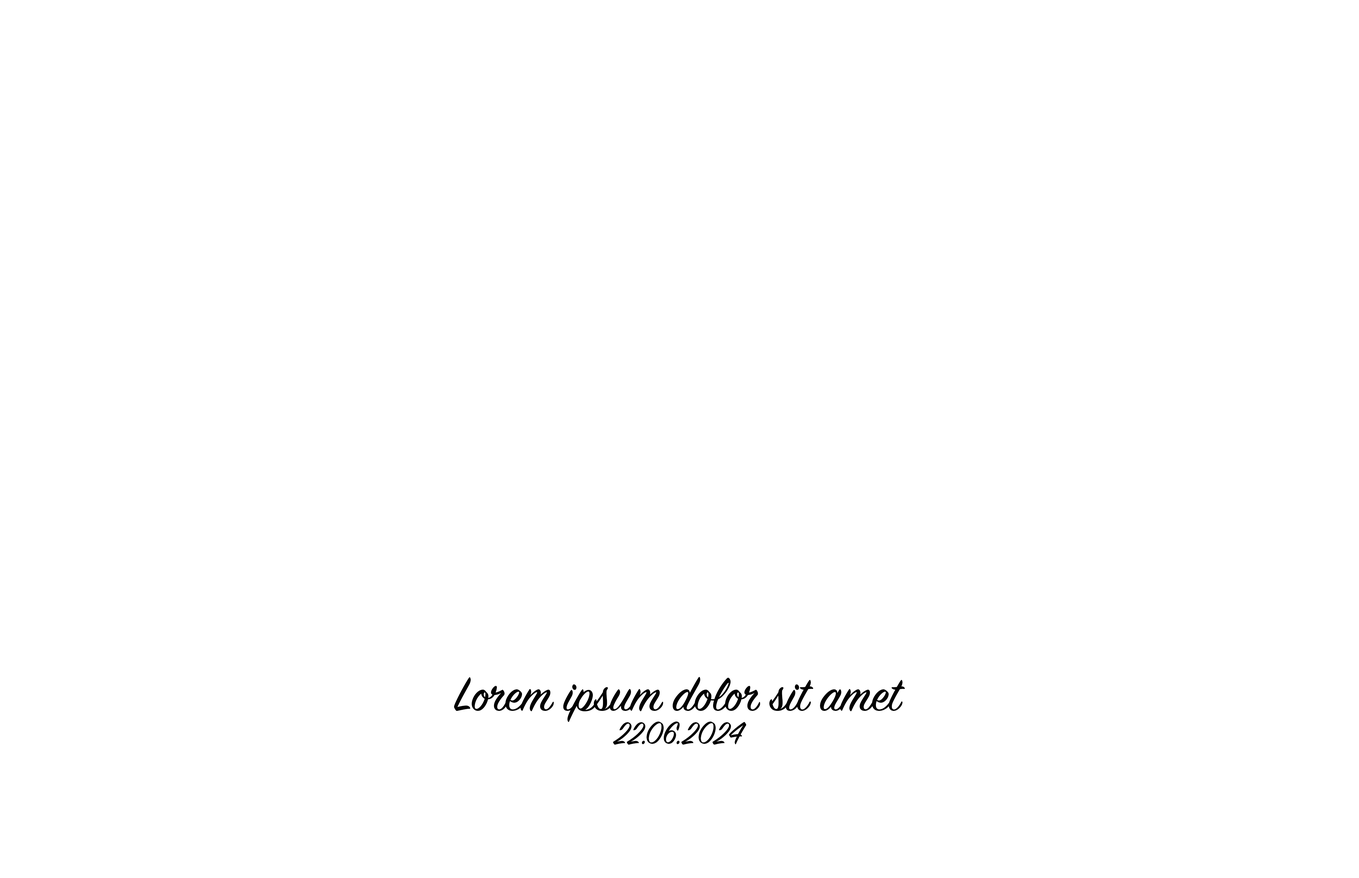
<style>
.page{position:relative;width:1359px;height:878px;background:#ffffff}
.page>*{position:absolute;margin:0}
.t1{font:53.1px "SignPainter-HouseScript";color:#010101}
.t2{font:35.4px "SignPainter-HouseScript";color:#010101}
</style>
<div class="page">
<p class="t1" style="left:454px;top:676px;width:451px;height:46px">Lorem ipsum dolor sit amet</p>
<p class="t2" style="left:613px;top:721px;width:133px;height:24px">22.06.2024</p>
</div>
